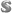
<style>
.page{position:relative;width:16px;height:16px;background:#ffffff}
.page>*{position:absolute;margin:0}
.t1{font:23px "CooperBlackStd";color:#898989}
</style>
<div class="page">
<p class="t1" style="left:0px;top:0px;width:12px;height:13px">s</p>
</div>
